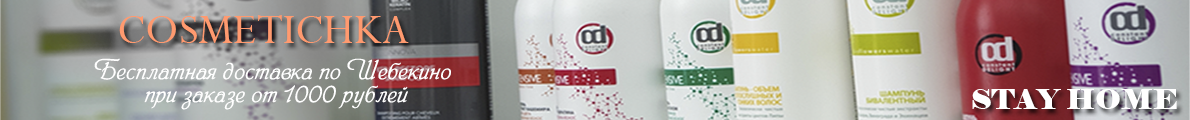
<style>
.page{position:relative;width:1190px;height:120px}
.page>*{position:absolute;margin:0}
.t1{font:46px "Perpetua";color:#ff9a6f}
.t2{font:27px/23px "PhillippScript";color:#ffffff}
.t3{font:26.9px "Elephant-Regular";color:#ffffff;scale:1.09 1}
</style>
<div class="page">
<p class="t1" style="left:119px;top:15px;width:290px;height:28px">COSMETICHKA</p>
<p class="t2" style="left:94px;top:58px;width:357px;height:52px;text-align:center">Бесплатная доставка по Шебекино <br>при заказе от 1000 рублей</p>
<p class="t3" style="left:972px;top:89px;width:205px;height:20px">STAY HOME</p>
</div>
